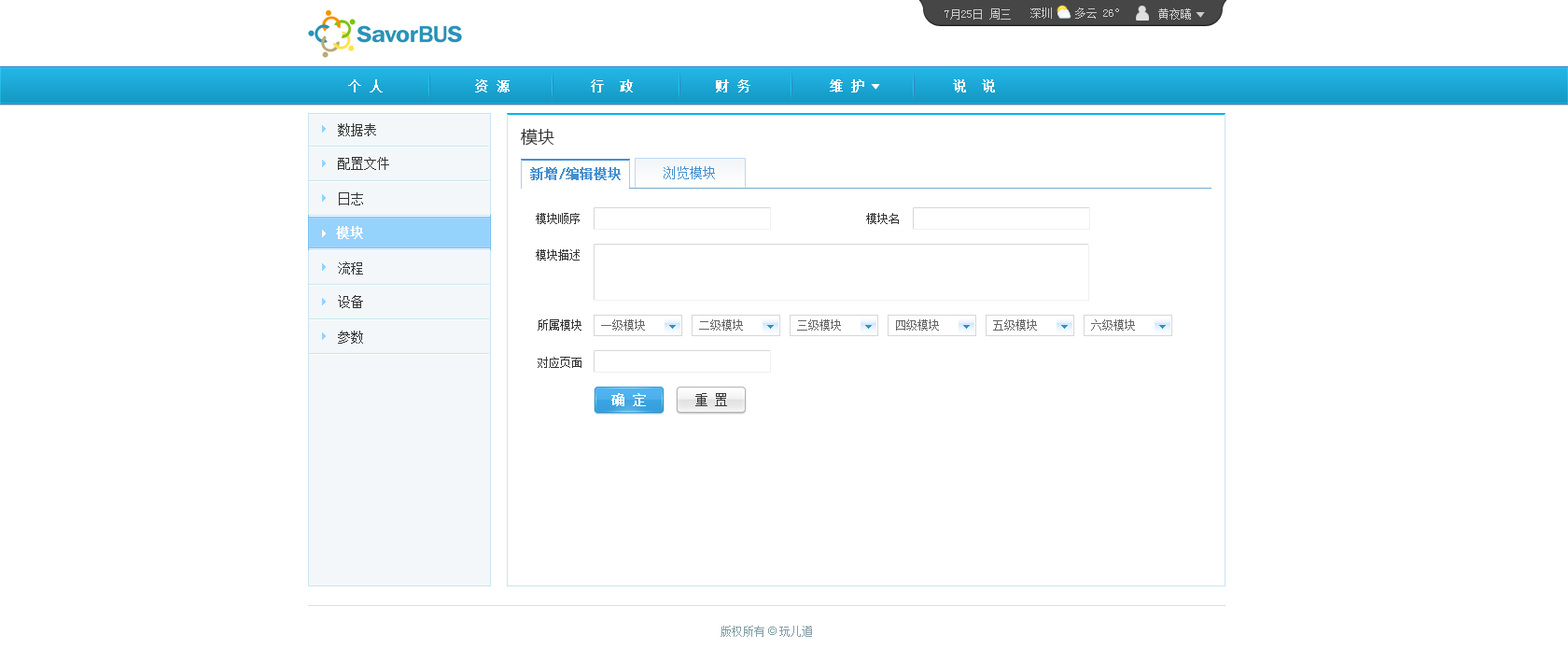
<style>
.page{position:relative;width:1568px;height:663px;background:#ffffff}
.page>*{position:absolute;margin:0}
.t1{font:11.2px "SimSun";color:#cccccc}
.t2{font:13.1px "SimSun";color:#ffffff;font-weight:bold}
.t3{font:13.1px "SimSun";color:#333333}
.t4{font:16.8px "MicrosoftYaHei";color:#333333}
.t5{font:13.1px "SimSun";color:#458fce;font-weight:bold}
.t6{font:13.1px "SimSun";color:#458fce}
.t7{font:11.2px "SimSun";color:#333333}
.t8{font:13.1px "SimSun";color:#fefefe;font-weight:bold}
.t9{font:11.2px "SimSun";color:#666666}
.t10{font:11.2px "SimSun";color:#849fa6}
.t11{font:11.2px "ArialMT";color:#849fa6}
</style>
<div class="page">
<p class="t1" style="left:945px;top:8px;width:66px;height:12px">7月25日 周三</p>
<p class="t1" style="left:1030px;top:7px;width:89px;height:12px">深圳    多云 26°</p>
<p class="t1" style="left:1158px;top:8px;width:33px;height:12px">黄夜曦</p>
<p class="t2" style="left:348px;top:79px;width:647px;height:13px">个 人         资 源           行  政           财 务       维 护          说  说</p>
<p class="t3" style="left:338px;top:123px;width:38px;height:13px">数据表</p>
<p class="t4" style="left:521px;top:128px;width:33px;height:18px">模块</p>
<p class="t3" style="left:338px;top:157px;width:51px;height:13px">配置文件</p>
<p class="t5" style="left:530px;top:167px;width:91px;height:13px">新增/编辑模块</p>
<p class="t6" style="left:664px;top:166px;width:51px;height:13px">浏览模块</p>
<p class="t3" style="left:339px;top:192px;width:24px;height:13px">日志</p>
<p class="t7" style="left:536px;top:213px;width:44px;height:11px">模块顺序</p>
<p class="t7" style="left:866px;top:213px;width:33px;height:11px">模块名</p>
<p class="t8" style="left:336px;top:226px;width:27px;height:13px">模块</p>
<p class="t7" style="left:536px;top:249px;width:44px;height:11px">模块描述</p>
<p class="t3" style="left:338px;top:261px;width:25px;height:13px">流程</p>
<p class="t3" style="left:338px;top:295px;width:25px;height:13px">设备</p>
<p class="t7" style="left:538px;top:319px;width:43px;height:11px">所属模块</p>
<p class="t9" style="left:601px;top:319px;width:44px;height:11px">一级模块</p>
<p class="t9" style="left:699px;top:319px;width:44px;height:11px">二级模块</p>
<p class="t9" style="left:797px;top:319px;width:44px;height:11px">三级模块</p>
<p class="t9" style="left:896px;top:319px;width:43px;height:11px">四级模块</p>
<p class="t9" style="left:993px;top:319px;width:44px;height:11px">五级模块</p>
<p class="t9" style="left:1091px;top:319px;width:44px;height:11px">六级模块</p>
<p class="t3" style="left:338px;top:330px;width:25px;height:13px">参数</p>
<p class="t7" style="left:538px;top:357px;width:43px;height:11px">对应页面</p>
<p class="t2" style="left:611px;top:393px;width:35px;height:13px">确 定</p>
<p class="t3" style="left:695px;top:393px;width:32px;height:13px">重 置</p>
<p class="t10" style="left:721px;top:625px;width:91px;height:12px">版权所有<span class="t11"> © </span>玩儿道</p>
</div>
